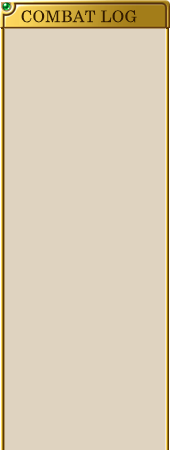
<style>
.page{position:relative;width:172px;height:450px;background:#dfd3c0}
.page>*{position:absolute;margin:0}
.t1{font:16px "CenturySchoolbook";letter-spacing:0.025em;color:#321a02}
</style>
<div class="page">
<p class="t1" style="left:21px;top:10px;width:116px;height:13px">COMBAT LOG</p>
</div>
